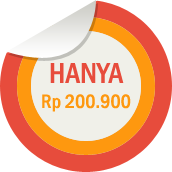
<style>
.page{position:relative;width:172px;height:172px;background:#ffffff}
.page>*{position:absolute;margin:0}
.t1{font:30px "FranklinGothic-MediumCond";color:#e74c3c}
.t2{font:20px "FranklinGothic-MediumCond";color:#fe980f}
</style>
<div class="page">
<p class="t1" style="left:50px;top:63px;width:74px;height:20px">HANYA</p>
<p class="t2" style="left:42px;top:94px;width:89px;height:18px">Rp 200.900</p>
</div>
